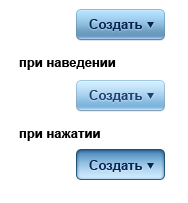
<style>
.page{position:relative;width:188px;height:203px;background:#ffffff}
.page>*{position:absolute;margin:0}
.t1{font:13px "Arial-BoldMT";color:#032455}
.t2{font:13px "Arial-BoldMT";color:#000000}
.t3{font:13px "Arial-BoldMT";color:#1f4070}
</style>
<div class="page">
<p class="t1" style="left:89px;top:19px;width:53px;height:12px">Создать</p>
<p class="t2" style="left:19px;top:60px;width:97px;height:10px">при наведении</p>
<p class="t3" style="left:89px;top:90px;width:53px;height:12px">Создать</p>
<p class="t2" style="left:19px;top:131px;width:81px;height:10px">при нажатии</p>
<p class="t1" style="left:89px;top:160px;width:53px;height:12px">Создать</p>
</div>
